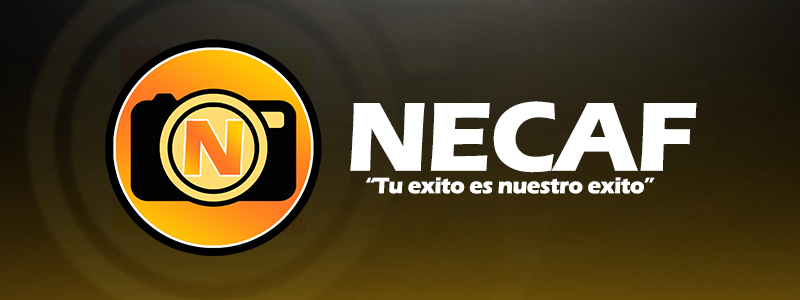
<style>
.page{position:relative;width:800px;height:300px}
.page>*{position:absolute;margin:0}
.t1{font:101.6px "ErasITC-Bold";letter-spacing:-0.025em;color:#ffffff}
.t2{font:22.7px "ErasITC-Bold";letter-spacing:-0.025em;color:#ffffff}
</style>
<div class="page">
<p class="t1" style="left:350px;top:101px;width:347px;height:72px">NECAF</p>
<p class="t2" style="left:366px;top:177px;width:289px;height:17px">“Tu exito es nuestro exito”</p>
</div>
